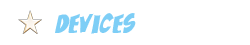
<style>
.page{position:relative;width:250px;height:45px;background:#ffffff}
.page>*{position:absolute;margin:0}
.t1{font:30px "HoustonComicsPersonalUse";color:#7ecef6}
</style>
<div class="page">
<p class="t1" style="left:55px;top:13px;width:81px;height:21px">DEVICES</p>
</div>
